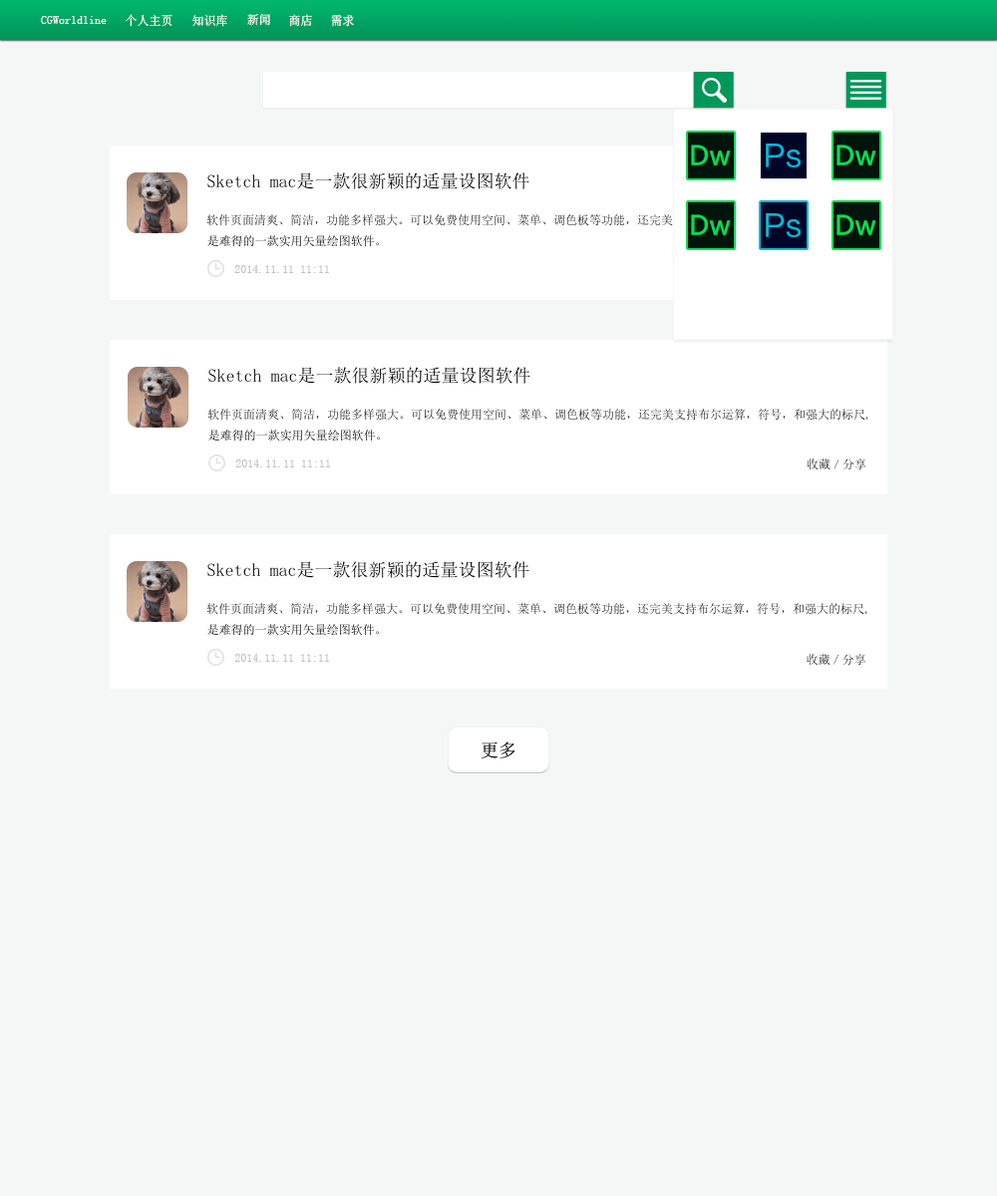
<style>
.page{position:relative;width:997px;height:1196px;background:#f5f6f6}
.page>*{position:absolute;margin:0}
.t1{font:12.4px "SimSun";color:#fdfcfc;scale:0.97 1}
.t2{font:25.9px "MicrosoftYaHei";color:#04de51;font-weight:bold}
.t3{font:30px "FZLTHJW--GB1-0";color:#04b8de}
.t4{font:17.9px "SimSun";color:#040404}
.t5{font:12px "SimSun";color:#1c1c1c}
.t6{font:12px "SimSun"}
.t7{font:12px "SimSun";color:#bec1c0}
.t8{font:17.9px "SimSun";color:#020202}
</style>
<div class="page">
<p class="t1" style="left:41px;top:16px;width:66px;height:8px">CGWorldline</p>
<p class="t1" style="left:126px;top:14px;width:46px;height:13px">个人主页</p>
<p class="t1" style="left:192px;top:14px;width:35px;height:13px">知识库</p>
<p class="t1" style="left:247px;top:13px;width:23px;height:13px">新闻</p>
<p class="t1" style="left:289px;top:14px;width:23px;height:13px">商店</p>
<p class="t1" style="left:331px;top:14px;width:23px;height:13px">需求</p>
<p class="t2" style="left:691px;top:145px;width:40px;height:20px">Dw</p>
<p class="t3" style="left:766px;top:144px;width:34px;height:23px">Ps</p>
<p class="t2" style="left:836px;top:145px;width:40px;height:20px">Dw</p>
<p class="t4" style="left:207px;top:172px;width:322px;height:17px">Sketch mac是一款很新颖的适量设图软件</p>
<p class="t5" style="left:206px;top:214px;width:661px;height:12px">软件页面清爽、简洁，功能多样强大。可以免费使用空间、菜单、调色板等功能，还完美支持布尔运算，符号，和强大的标尺,</p>
<p class="t2" style="left:691px;top:214px;width:40px;height:21px">Dw</p>
<p class="t3" style="left:766px;top:213px;width:34px;height:24px">Ps</p>
<p class="t2" style="left:836px;top:214px;width:40px;height:21px">Dw</p>
<p class="t6" style="left:207px;top:235px;width:172px;height:12px">是难得的一款实用矢量绘图软件。</p>
<p class="t7" style="left:234px;top:264px;width:95px;height:9px">2014.11.11 11:11</p>
<p class="t4" style="left:208px;top:367px;width:322px;height:17px">Sketch mac是一款很新颖的适量设图软件</p>
<p class="t5" style="left:207px;top:409px;width:661px;height:12px">软件页面清爽、简洁，功能多样强大。可以免费使用空间、菜单、调色板等功能，还完美支持布尔运算，符号，和强大的标尺,</p>
<p class="t6" style="left:208px;top:430px;width:172px;height:12px">是难得的一款实用矢量绘图软件。</p>
<p class="t7" style="left:235px;top:459px;width:95px;height:9px">2014.11.11 11:11</p>
<p class="t6" style="left:807px;top:459px;width:59px;height:12px">收藏／分享</p>
<p class="t4" style="left:207px;top:561px;width:322px;height:17px">Sketch mac是一款很新颖的适量设图软件</p>
<p class="t5" style="left:206px;top:603px;width:661px;height:12px">软件页面清爽、简洁，功能多样强大。可以免费使用空间、菜单、调色板等功能，还完美支持布尔运算，符号，和强大的标尺,</p>
<p class="t6" style="left:207px;top:624px;width:172px;height:12px">是难得的一款实用矢量绘图软件。</p>
<p class="t7" style="left:234px;top:653px;width:95px;height:9px">2014.11.11 11:11</p>
<p class="t6" style="left:806px;top:654px;width:59px;height:12px">收藏／分享</p>
<p class="t8" style="left:480px;top:742px;width:35px;height:17px">更多</p>
</div>
